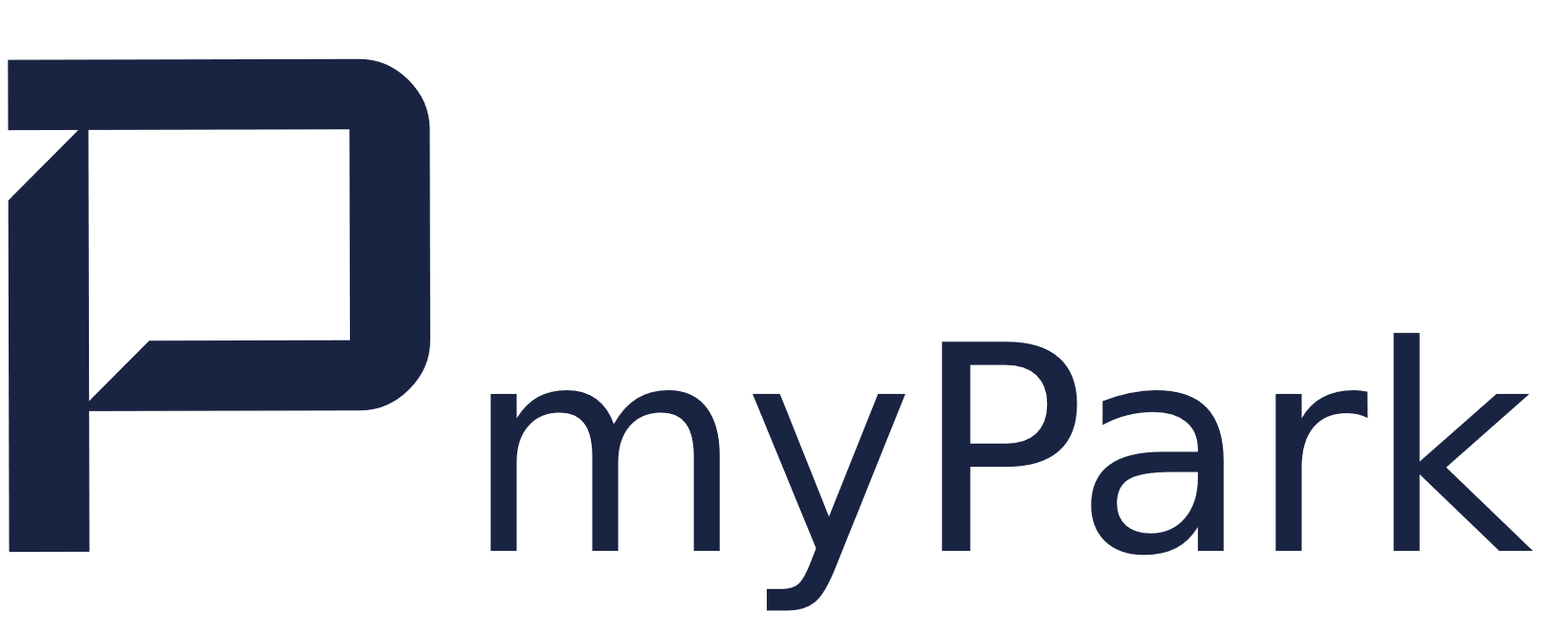
<style>
.page{position:relative;width:1568px;height:635px;background:#ffffff}
.page>*{position:absolute;margin:0}
.t1{font:1003.9px "Iceland-Regular";color:#192342}
.t2{font:286.8px "DejaVuSans";color:#192342}
</style>
<div class="page">
<p class="t1" style="left:8px;top:58px;width:423px;height:495px">P</p>
<p class="t2" style="left:490px;top:333px;width:1044px;height:278px">myPark</p>
</div>
